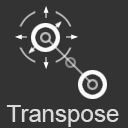
<style>
.page{position:relative;width:128px;height:128px;background:#333333}
.page>*{position:absolute;margin:0}
.t1{font:24px "ArialMT";color:#dadada}
</style>
<div class="page">
<p class="t1" style="left:6px;top:105px;width:113px;height:22px">Transpose</p>
</div>
